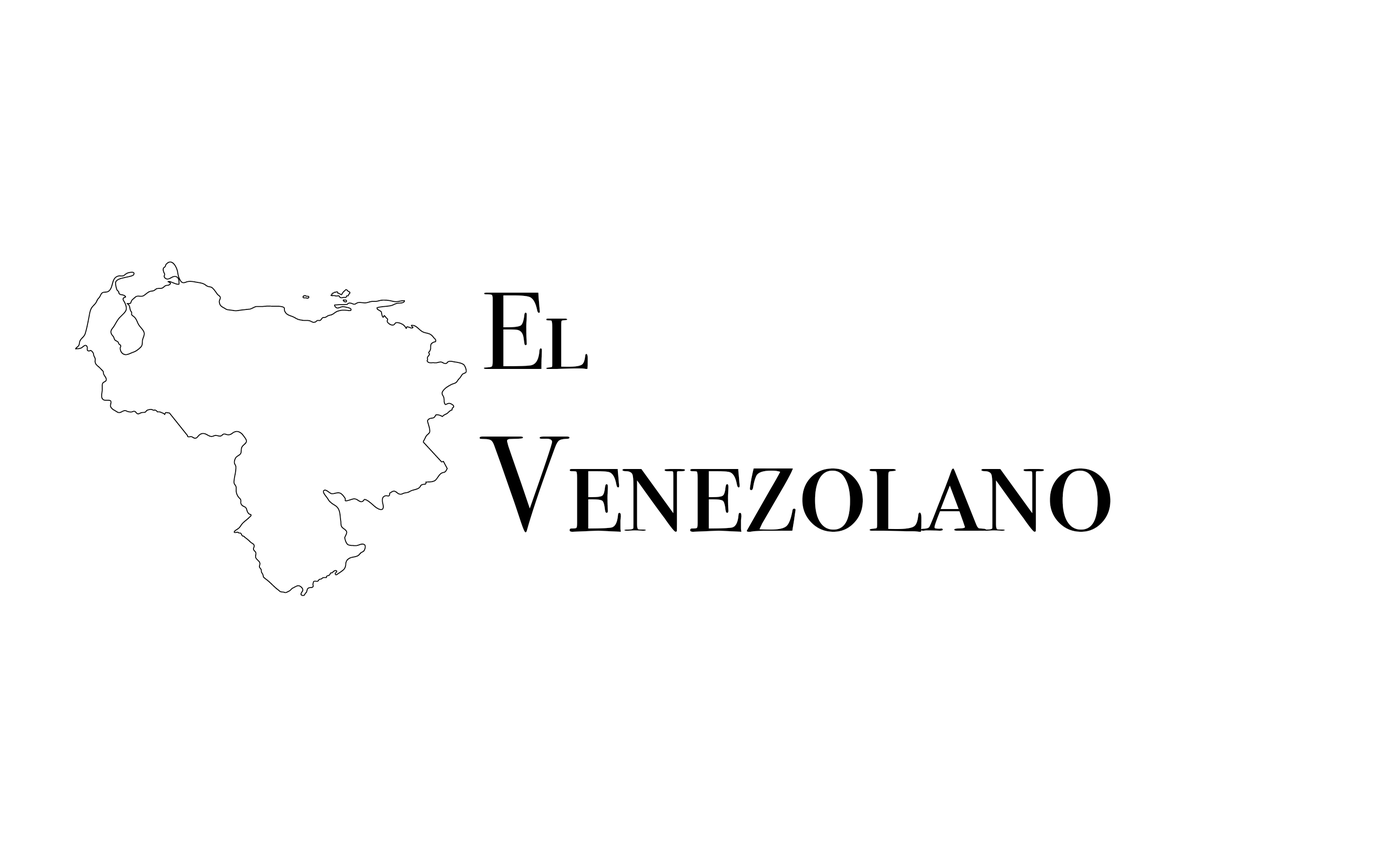
<style>
.page{position:relative;width:1379px;height:865px;background:#ffffff}
.page>*{position:absolute;margin:0}
.t1{font:135.2px "BodoniSvtyTwoSCITCTT-Book";color:#000000}
.t2{font:108.1px "BodoniSvtyTwoSCITCTT-Book";color:#000000}
</style>
<div class="page">
<p class="t1" style="left:480px;top:293px;width:631px;height:239px"><span class="t2">El <br></span>Venezolano</p>
</div>
